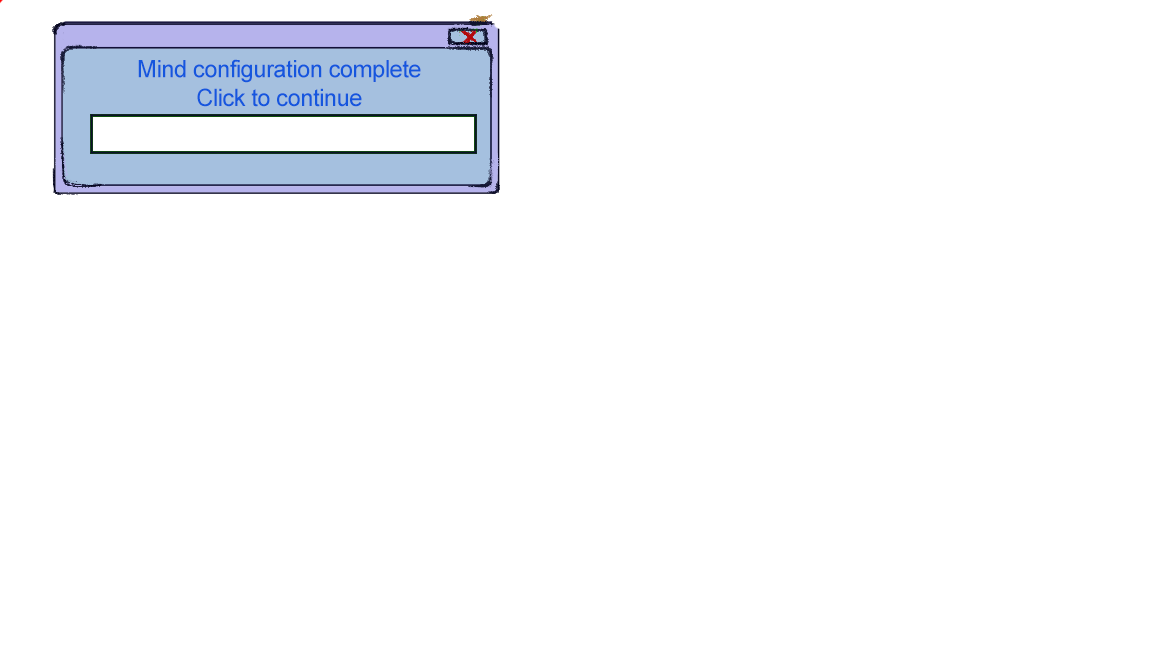
<style>
.page{position:relative;width:1152px;height:648px;background:#ffffff}
.page>*{position:absolute;margin:0}
.t1{font:24px "ArialMT";letter-spacing:-0.025em;color:#1556de}
</style>
<div class="page">
<p class="t1" style="left:138px;top:59px;width:283px;height:48px;text-align:center">Mind configuration complete<br>Click to continue</p>
</div>
